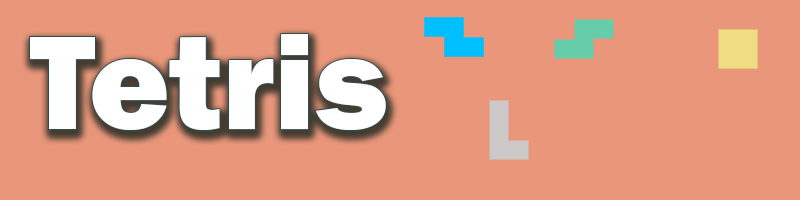
<style>
.page{position:relative;width:800px;height:200px;background:#e9967a}
.page>*{position:absolute;margin:0}
.t1{font:138px "FranklinGothic-Heavy";color:#ffffff}
</style>
<div class="page">
<p class="t1" style="left:30px;top:34px;width:356px;height:96px">Tetris</p>
</div>
